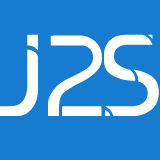
<style>
.page{position:relative;width:160px;height:160px;background:#177bcf}
.page>*{position:absolute;margin:0}
.t1{font:110.9px "Skynet.Enterprise";letter-spacing:-0.075em;color:#ffffff;text-transform:uppercase}
</style>
<div class="page">
<p class="t1" style="left:0px;top:34px;width:159px;height:82px">J2S</p>
</div>
